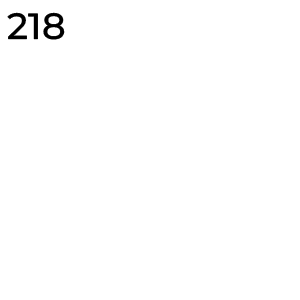
<style>
.page{position:relative;width:300px;height:300px;background:#ffffff}
.page>*{position:absolute;margin:0}
.t1{font:36.6px "MontserratRoman-Medium";color:#000000}
</style>
<div class="page">
<p class="t1" style="left:7px;top:12px;width:58px;height:28px">218</p>
</div>
